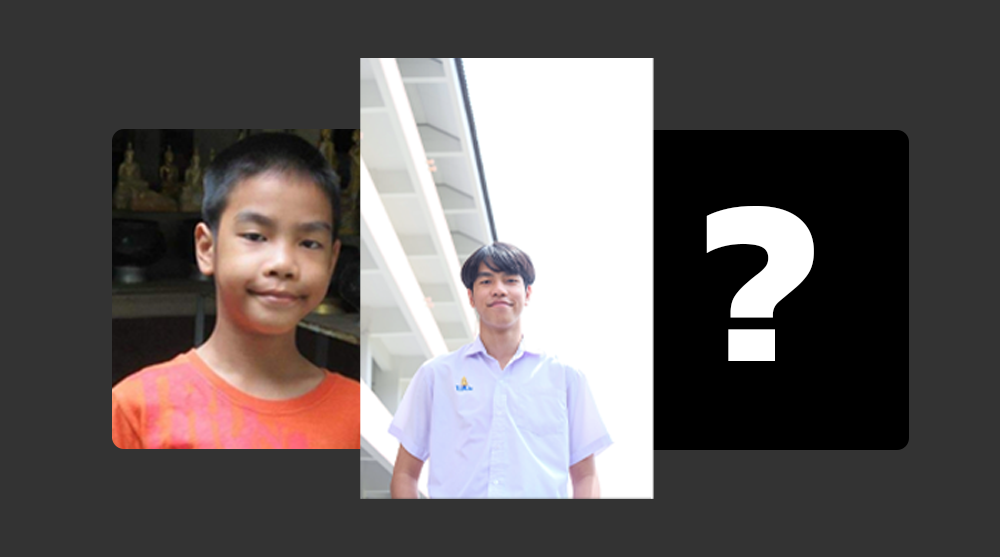
<style>
.page{position:relative;width:1000px;height:557px;background:#333333}
.page>*{position:absolute;margin:0}
.t1{font:237.2px "Kanit-Bold";color:#ffffff}
</style>
<div class="page">
<p class="t1" style="left:706px;top:206px;width:108px;height:155px">?</p>
</div>
